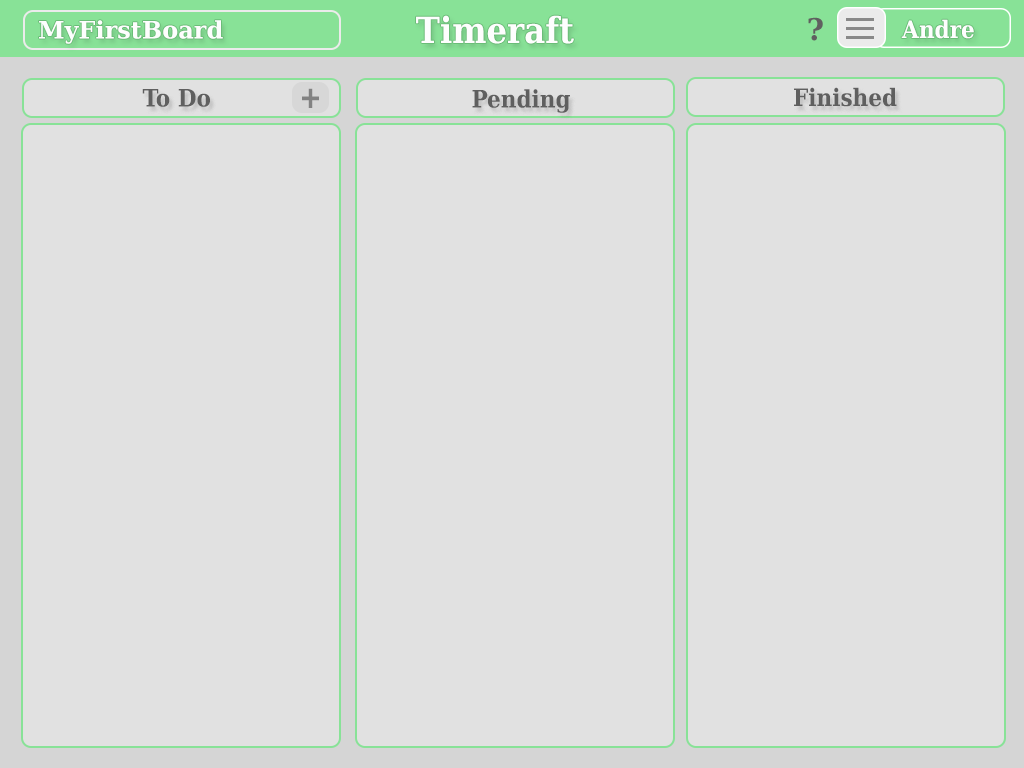
<style>
.page{position:relative;width:1024px;height:768px;background:#e1e1e1}
.page>*{position:absolute;margin:0}
.t1{font:36px "DejaVuSerifCondensed-Bold";color:#fefefe}
.t2{font:30px "DejaVuSerif-Bold";color:#606060}
.t3{font:24px "DejaVuSerif-Bold";color:#fefefe}
.t4{font:24px "DejaVuSerifCondensed-Bold";color:#fefefe}
.t5{font:24px "DejaVuSerifCondensed-Bold";color:#5f5f5f}
</style>
<div class="page">
<p class="t1" style="left:416px;top:15px;width:158px;height:29px">Timeraft</p>
<p class="t2" style="left:808px;top:17px;width:15px;height:24px">?</p>
<p class="t3" style="left:39px;top:20px;width:184px;height:24px">MyFirstBoard</p>
<p class="t4" style="left:901px;top:19px;width:73px;height:20px">Andre</p>
<p class="t5" style="left:142px;top:89px;width:68px;height:18px">To Do</p>
<p class="t5" style="left:472px;top:89px;width:98px;height:24px">Pending</p>
<p class="t5" style="left:794px;top:87px;width:103px;height:20px">Finished</p>
</div>
